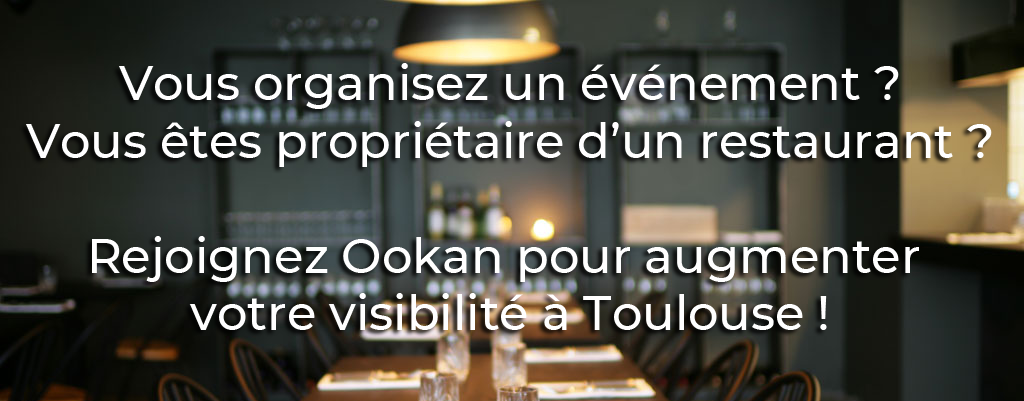
<style>
.page{position:relative;width:1024px;height:401px}
.page>*{position:absolute;margin:0}
.t1{font:48px "Montserrat-Medium";color:#ffffff}
</style>
<div class="page">
<p class="t1" style="left:26px;top:63px;width:966px;height:267px;text-align:center">Vous organisez un événement ?<br>Vous êtes propriétaire d’un restaurant ?<br><br>Rejoignez Ookan pour augmenter <br>votre visibilité à Toulouse !</p>
</div>
